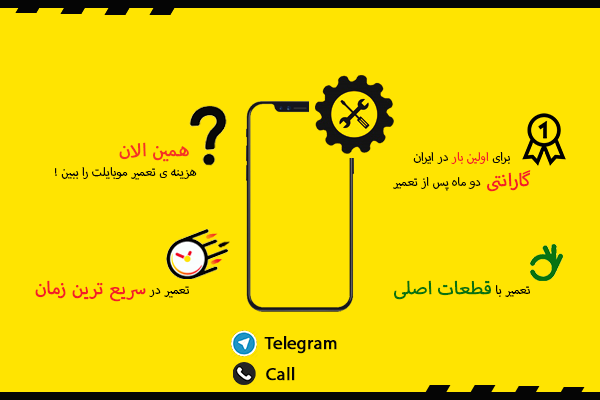
<style>
.page{position:relative;width:600px;height:400px;background:#ffe401}
.page>*{position:absolute;margin:0}
.t1{font:25px "MyriadArabic-Regular";color:#f53424;font-weight:bold}
.t2{font:16.7px "MyriadArabic-Regular";color:#f41d27}
.t3{font:16.7px "MyriadArabic-Regular";color:#080808}
.t4{font:25px "MyriadArabic-Regular";color:#f41d27;font-weight:bold}
.t5{font:16.7px "MyriadArabic-Regular";color:#000000}
.t6{font:25px "MyriadArabic-Regular";color:#077211;font-weight:bold}
.t7{font:25px "MyriadArabic-Regular";color:#050505;font-weight:bold}
</style>
<div class="page">
<p class="t1" style="left:119px;top:142px;width:70px;height:20px">همین الان</p>
<p class="t2" style="left:413px;top:152px;width:97px;height:12px"><span class="t3">برای </span>اولین بار<span class="t3"> در ایران</span></p>
<p class="t3" style="left:55px;top:167px;width:142px;height:13px">! هزینه ی تعمیر موبایلت را ببین</p>
<p class="t3" style="left:393px;top:170px;width:138px;height:22px"><span class="t4">گارانتی </span>دو ماه پس از تعمیر</p>
<p class="t4" style="left:35px;top:280px;width:154px;height:22px"><span class="t5">تعمیر در </span>سریع ترین زمان</p>
<p class="t6" style="left:394px;top:280px;width:136px;height:20px"><span class="t5">تعمیر با </span>قطعات اصلی</p>
<p class="t7" style="left:264px;top:336px;width:73px;height:18px">Telegram</p>
<p class="t7" style="left:266px;top:367px;width:29px;height:14px">Call</p>
</div>
